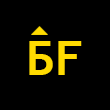
<style>
.page{position:relative;width:110px;height:110px;background:#000000}
.page>*{position:absolute;margin:0}
.t1{font:48px "TrebuchetMS-Bold";letter-spacing:0.005em;color:#ffdc01}
</style>
<div class="page">
<p class="t1" style="left:29px;top:41px;width:24px;height:34px">Б</p>
<p class="t1" style="left:58px;top:41px;width:24px;height:34px">F</p>
</div>
